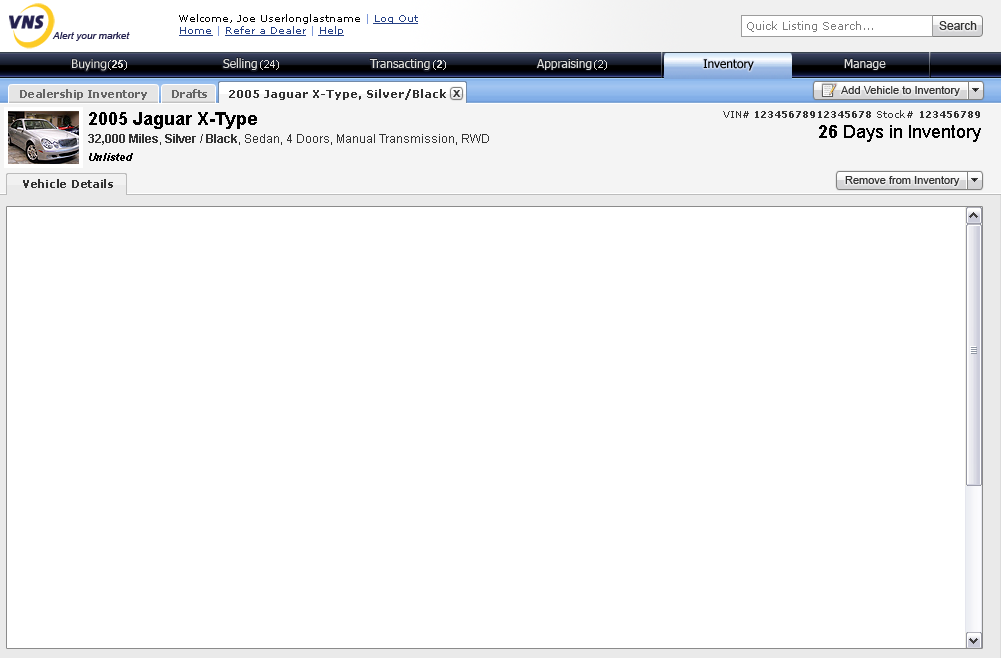
<style>
.page{position:relative;width:1001px;height:658px;background:#ffffff}
.page>*{position:absolute;margin:0}
.t1{font:10px "Verdana";color:#010101}
.t2{font:10px "Verdana";color:#7f9ada}
.t3{font:10px "Verdana";color:#254085;text-decoration:underline}
.t4{font:11px "Verdana";color:#7c7c7c}
.t5{font:12px "ArialMT";color:#333333}
.t6{font:10px "Arial-ItalicMT";color:#24214f}
.t7{font:12px "Tahoma";color:#dededc}
.t8{font:11px "Arial-BoldMT";color:#dededc}
.t9{font:11px "ArialMT";color:#dededc}
.t10{font:12px "Tahoma"}
.t11{font:12px "Tahoma";color:#010101}
.t12{font:11px "Verdana-Bold";letter-spacing:-0.05em;color:#666666}
.t13{font:11px "Verdana-Bold";color:#323232}
.t14{font:11px "ArialMT";color:#333333}
.t15{font:10px "Arial-BoldMT";color:#333333;scale:1.1 1}
.t16{font:12px/18px "ArialMT";color:#333333}
.t17{font:18px/18px "Arial-BoldMT";color:#000000}
.t18{font:12px/18px "Arial-BoldMT";color:#333333}
.t19{font:10px "Verdana-Bold";color:#333333}
.t20{font:10px "Verdana";color:#333333}
.t21{font:18px "ArialMT";color:#000000}
.t22{font:18px "Arial-BoldMT";color:#000000}
.t23{font:11px "Arial-BoldItalicMT";color:#000000}
.t24{font:11px "Verdana-Bold";letter-spacing:-0.025em;color:#323232}
</style>
<div class="page">
<p class="t1" style="left:179px;top:14px;width:239px;height:10px">Welcome, Joe Userlonglastname<span class="t2"> | </span><span class="t3">Log Out</span></p>
<p class="t3" style="left:179px;top:26px;width:165px;height:10px">Home <span class="t2">| </span>Refer a Dealer <span class="t2">| </span>Help</p>
<p class="t4" style="left:747px;top:21px;width:126px;height:11px">Quick Listing Search...</p>
<p class="t5" style="left:939px;top:21px;width:38px;height:9px">Search</p>
<p class="t6" style="left:52px;top:32px;width:78px;height:9px">Alert your market</p>
<p class="t7" style="left:72px;top:59px;width:35px;height:12px">Buying</p>
<p class="t8" style="left:108px;top:60px;width:19px;height:10px"><span class="t9"> (</span>25<span class="t9">)</span></p>
<p class="t7" style="left:223px;top:58px;width:34px;height:12px">Selling</p>
<p class="t9" style="left:260px;top:60px;width:19px;height:10px">(24)</p>
<p class="t7" style="left:369px;top:59px;width:61px;height:11px">Transacting</p>
<p class="t9" style="left:433px;top:60px;width:13px;height:10px">(<span class="t8">2</span>)</p>
<p class="t7" style="left:537px;top:59px;width:55px;height:11px">Appraising</p>
<p class="t9" style="left:594px;top:60px;width:13px;height:10px">(2)</p>
<p class="t10" style="left:703px;top:59px;width:51px;height:11px">Inventory</p>
<p class="t11" style="left:703px;top:59px;width:51px;height:12px">Inventory</p>
<p class="t7" style="left:844px;top:59px;width:42px;height:11px">Manage</p>
<p class="t12" style="left:20px;top:89px;width:127px;height:11px">Dealership Inventory</p>
<p class="t12" style="left:172px;top:89px;width:35px;height:9px">Drafts</p>
<p class="t13" style="left:229px;top:89px;width:217px;height:11px">2005 Jaguar X-Type, Silver/Black</p>
<p class="t14" style="left:841px;top:86px;width:119px;height:10px">Add Vehicle to Inventory</p>
<p class="t15" style="left:453px;top:90px;width:8px;height:7px">X</p>
<p class="t16" style="left:88px;top:112px;width:401px;height:33px"><span class="t17">2005 Jaguar X-Type <br></span><span class="t18">32,000 Miles</span>, <span class="t18">Silver / Black</span>, Sedan, 4 Doors, Manual Transmission, RWD</p>
<p class="t19" style="left:723px;top:110px;width:257px;height:8px"><span class="t20">VIN#</span> 12345678912345678<span class="t20"> Stock# </span>123456789</p>
<p class="t21" style="left:819px;top:125px;width:162px;height:17px"><span class="t22">26</span> Days in Inventory</p>
<p class="t23" style="left:89px;top:153px;width:44px;height:8px">Unlisted</p>
<p class="t24" style="left:23px;top:179px;width:90px;height:9px">Vehicle Details</p>
<p class="t14" style="left:845px;top:176px;width:115px;height:10px">Remove from Inventory</p>
</div>
